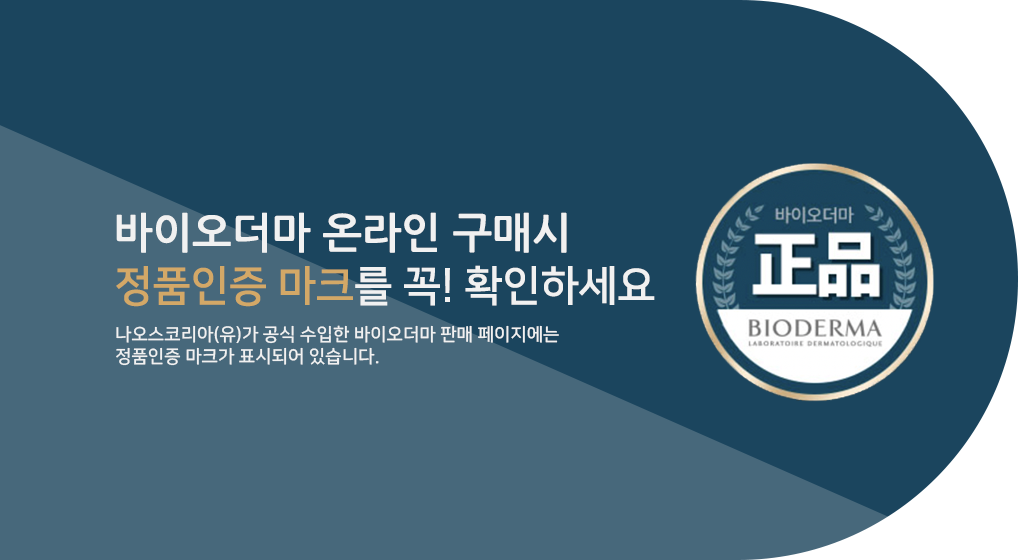
<style>
.page{position:relative;width:1018px;height:560px;background:#1b455e}
.page>*{position:absolute;margin:0}
.t1{font:42.1px "NanumGothicBold";color:#f1f1f1}
.t2{font:42.1px "NanumSquareB";color:#f1f1f1}
.t3{font:42.1px "NanumSquareB";color:#d3a867}
.t4{font:18px "NanumSquareB";color:#f1f1f1}
</style>
<div class="page">
<p class="t1" style="left:116px;top:212px;width:451px;height:41px">바이오더마 온라인 구매시</p>
<p class="t2" style="left:116px;top:265px;width:539px;height:42px"><span class="t3">정품인증 마크</span>를 꼭! 확인하세요</p>
<p class="t4" style="left:116px;top:325px;width:443px;height:41px">나오스코리아(유)가 공식 수입한 바이오더마 판매 페이지에는<br>정품인증 마크가 표시되어 있습니다.</p>
</div>
